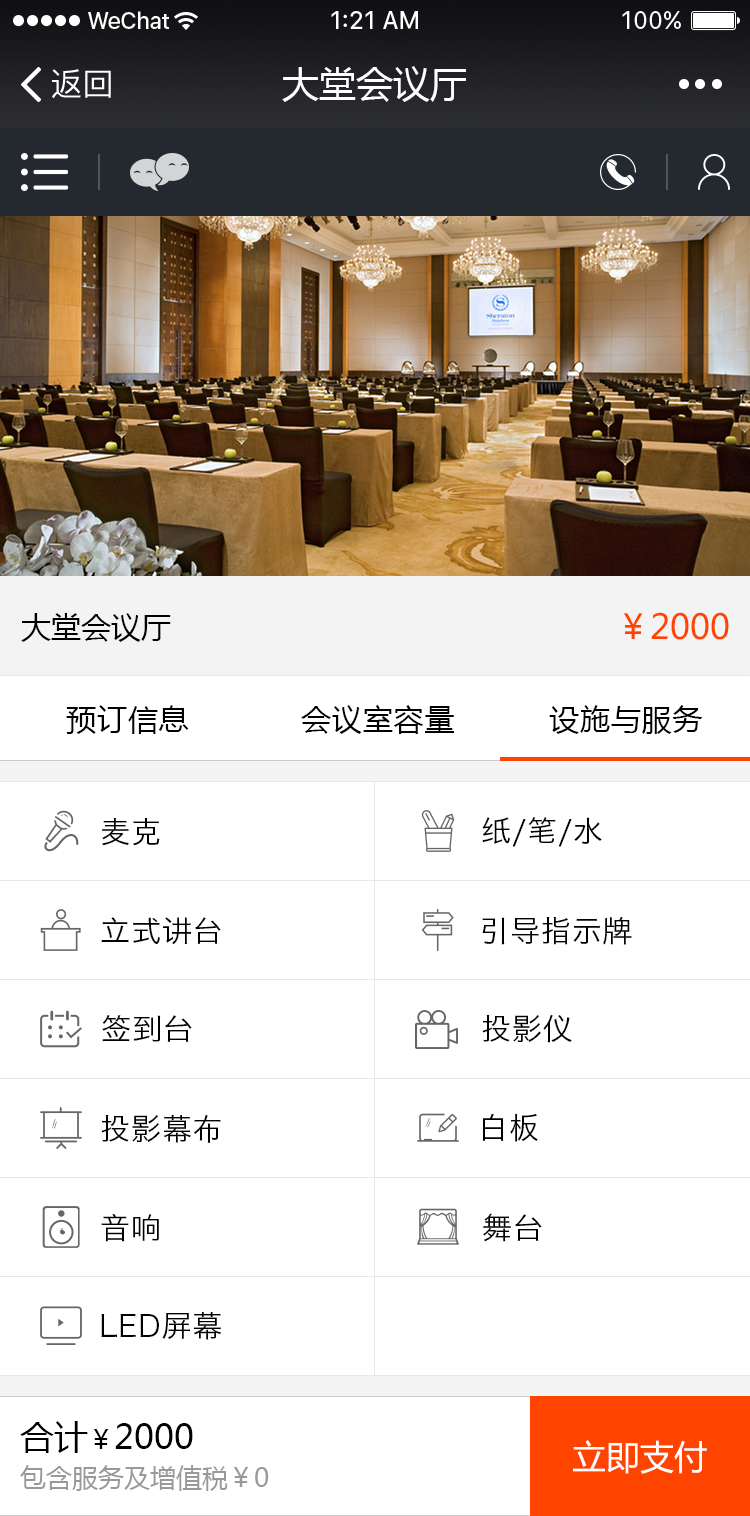
<style>
.page{position:relative;width:750px;height:1516px;background:#ffffff}
.page>*{position:absolute;margin:0}
.t1{font:32px "PingFangSC-Regular";color:#ffffff}
.t2{font:37px "MicrosoftYaHei";color:#ffffff}
.t3{font:30px "MicrosoftYaHei";color:#000000}
.t4{font:34px "MicrosoftYaHei";color:#ff4400}
.t5{font:30px "MicrosoftYaHei";letter-spacing:0.03em;color:#000000}
.t6{font:30px "HiraginoSansGB-W3";letter-spacing:0.03em;color:#000000}
.t7{font:26px/45px "MicrosoftYaHei";color:#999999}
.t8{font:34px/45px "MicrosoftYaHei";color:#000000}
.t9{font:26px/45px "MicrosoftYaHei";color:#000000}
.t10{font:34px "MicrosoftYaHei";color:#ffffff}
</style>
<div class="page">
<p class="t1" style="left:52px;top:69px;width:59px;height:30px">返回</p>
<p class="t2" style="left:282px;top:66px;width:184px;height:36px">大堂会议厅</p>
<p class="t3" style="left:21px;top:613px;width:150px;height:29px">大堂会议厅</p>
<p class="t4" style="left:623px;top:612px;width:106px;height:28px">￥2000</p>
<p class="t5" style="left:66px;top:705px;width:123px;height:29px">预订信息</p>
<p class="t5" style="left:301px;top:705px;width:153px;height:29px">会议室容量</p>
<p class="t5" style="left:549px;top:705px;width:154px;height:29px">设施与服务</p>
<p class="t6" style="left:102px;top:818px;width:58px;height:28px">麦克</p>
<p class="t6" style="left:482px;top:817px;width:120px;height:30px">纸/笔/水</p>
<p class="t6" style="left:101px;top:917px;width:120px;height:28px">立式讲台</p>
<p class="t6" style="left:482px;top:917px;width:150px;height:28px">引导指示牌</p>
<p class="t6" style="left:482px;top:1014px;width:90px;height:29px">投影仪</p>
<p class="t6" style="left:102px;top:1015px;width:90px;height:27px">签到台</p>
<p class="t6" style="left:101px;top:1115px;width:120px;height:28px">投影幕布</p>
<p class="t6" style="left:482px;top:1113px;width:56px;height:29px">白板</p>
<p class="t6" style="left:101px;top:1213px;width:58px;height:29px">音响</p>
<p class="t6" style="left:483px;top:1213px;width:59px;height:29px">舞台</p>
<p class="t6" style="left:101px;top:1311px;width:121px;height:29px">LED屏幕</p>
<p class="t7" style="left:20px;top:1421px;width:249px;height:70px"><span class="t8">合计</span><span class="t9">￥</span><span class="t8">2000<br></span>包含服务及增值税￥0</p>
<p class="t10" style="left:573px;top:1440px;width:134px;height:34px">立即支付</p>
</div>
